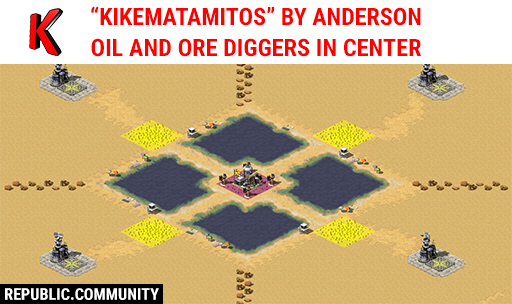
<style>
.page{position:relative;width:512px;height:304px}
.page>*{position:absolute;margin:0}
.t1{font:24px "RobotoCondensed-Bold";color:#ff0000;text-transform:uppercase}
.t2{font:24px "RobotoCondensed-Bold";letter-spacing:0.005em;color:#ff0000;text-transform:uppercase}
.t3{font:16px "RobotoCondensed-Bold";letter-spacing:0.005em;color:#ffffff;text-transform:uppercase}
</style>
<div class="page">
<p class="t1" style="left:91px;top:6px;width:330px;height:20px">“kikematamitos” by anderson</p>
<p class="t2" style="left:91px;top:38px;width:330px;height:19px">oil and ore diggers in center</p>
<p class="t3" style="left:5px;top:288px;width:154px;height:12px">republic.community</p>
</div>
